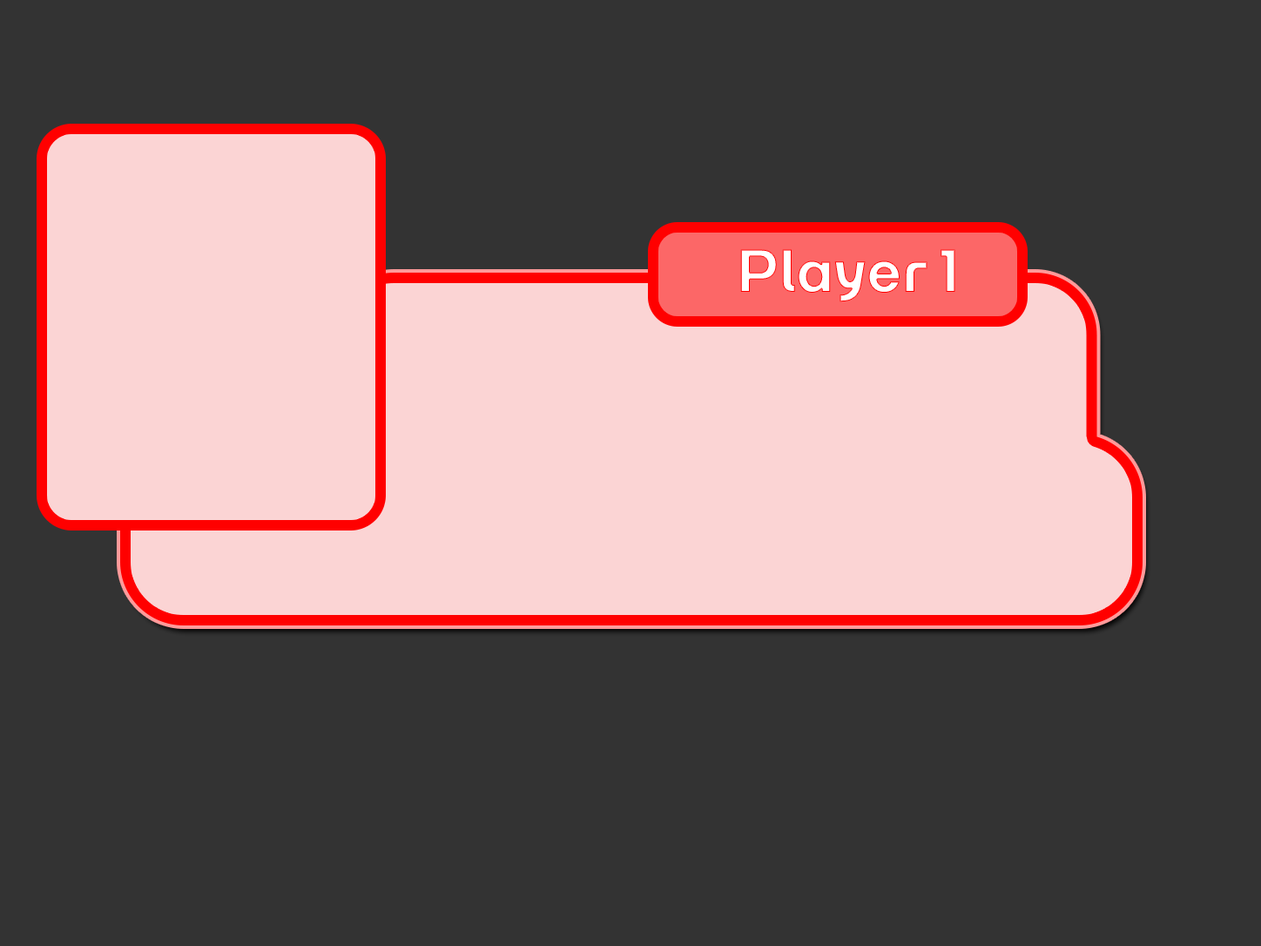
<style>
.page{position:relative;width:1261px;height:946px;background:#333333}
.page>*{position:absolute;margin:0}
.t1{font:46.2px "RiaSans-Bold";color:#ffffff}
</style>
<div class="page">
<p class="t1" style="left:740px;top:249px;width:215px;height:53px">Player 1</p>
</div>
